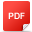
<style>
.page{position:relative;width:32px;height:32px}
.page>*{position:absolute;margin:0}
.t1{font:8.6px "Arial-BoldMT";color:#ffffff}
</style>
<div class="page">
<p class="t1" style="left:8px;top:12px;width:17px;height:7px">PDF</p>
</div>
